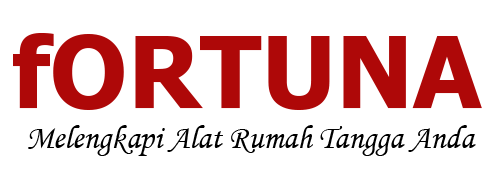
<style>
.page{position:relative;width:500px;height:188px;background:#ffffff}
.page>*{position:absolute;margin:0}
.t1{font:99px "Tahoma-Bold";color:#ae0808}
.t2{font:32.8px "MonotypeCorsiva";color:#000000}
</style>
<div class="page">
<p class="t1" style="left:13px;top:33px;width:469px;height:77px">fORTUNA</p>
<p class="t2" style="left:28px;top:125px;width:448px;height:31px">Melengkapi Alat Rumah Tangga Anda</p>
</div>
